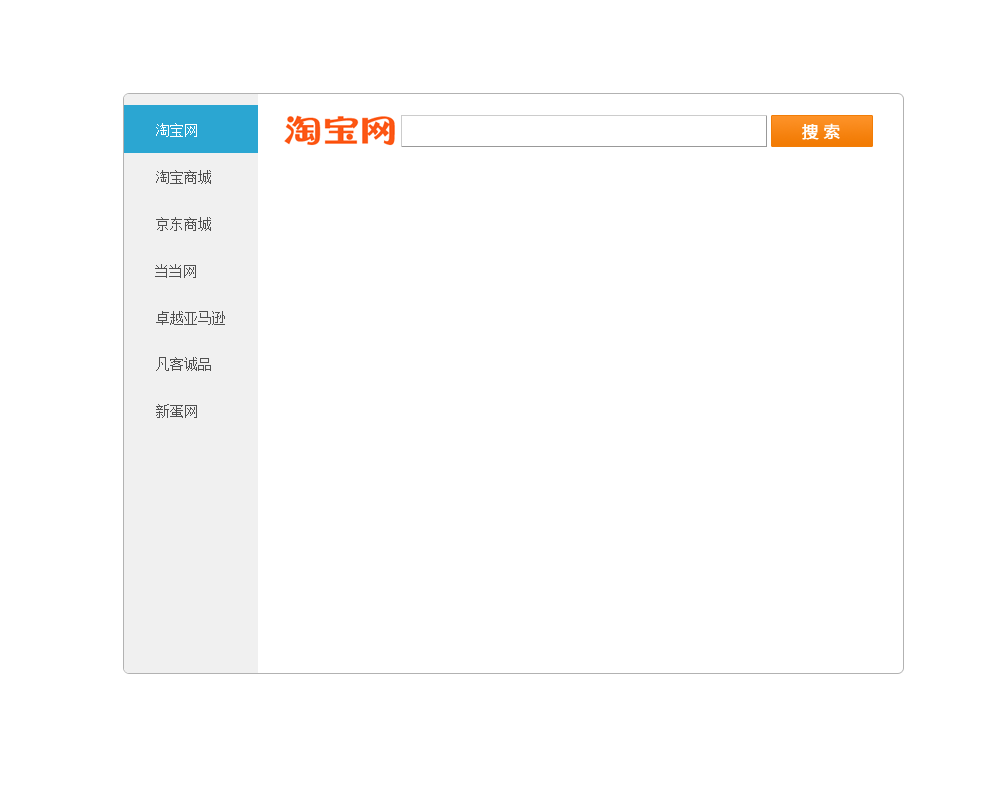
<style>
.page{position:relative;width:1000px;height:800px;background:#ffffff}
.page>*{position:absolute;margin:0}
.t1{font:14px "SimSun";color:#ffffff}
.t2{font:14px "SimSun";color:#505050}
</style>
<div class="page">
<p class="t1" style="left:156px;top:123px;width:41px;height:14px">淘宝网</p>
<p class="t2" style="left:156px;top:170px;width:55px;height:14px">淘宝商城</p>
<p class="t2" style="left:156px;top:217px;width:55px;height:14px">京东商城</p>
<p class="t2" style="left:155px;top:264px;width:41px;height:14px">当当网</p>
<p class="t2" style="left:156px;top:311px;width:69px;height:14px">卓越亚马逊</p>
<p class="t2" style="left:156px;top:357px;width:55px;height:14px">凡客诚品</p>
<p class="t2" style="left:156px;top:404px;width:41px;height:14px">新蛋网</p>
</div>
